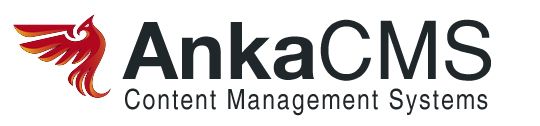
<style>
.page{position:relative;width:540px;height:126px;background:#ffffff}
.page>*{position:absolute;margin:0}
.t1{font:80px "HelveticaNeueLTPro-Bd";color:#20272a}
.t2{font:80px "HelveticaTurk";color:#20272a}
.t3{font:28px "Helvetica-Narrow";letter-spacing:0.07em;color:#20272a}
</style>
<div class="page">
<p class="t1" style="left:122px;top:19px;width:369px;height:62px">Anka<span class="t2">CMS</span></p>
<p class="t3" style="left:125px;top:88px;width:363px;height:28px">Content Management Systems</p>
</div>
